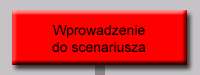
<style>
.page{position:relative;width:200px;height:75px;background:#ff0000}
.page>*{position:absolute;margin:0}
.t1{font:14px "ArialMT";color:#000000}
</style>
<div class="page">
<p class="t1" style="left:52px;top:25px;width:94px;height:27px;text-align:center">Wprowadzenie<br>do scenariusza</p>
</div>
